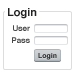
<style>
.page{position:relative;width:75px;height:75px;background:#ffffff}
.page>*{position:absolute;margin:0}
.t1{font:11px "Helvetica-Bold";color:#222222}
.t2{font:8px/12px "Helvetica-Bold";color:#474747}
.t3{font:7px "Helvetica-Bold";color:#222222}
</style>
<div class="page">
<p class="t1" style="left:8px;top:8px;width:29px;height:11px">Login</p>
<p class="t2" style="left:12px;top:25px;width:18px;height:18px;text-align:right">User<br>Pass</p>
<p class="t3" style="left:38px;top:53px;width:19px;height:7px">Login</p>
</div>
